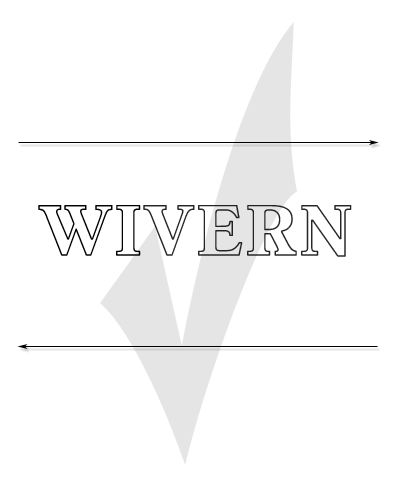
<style>
.page{position:relative;width:400px;height:500px;background:#ffffff}
.page>*{position:absolute;margin:0}
.t1{font:72px "AntiquaHo";color:#262626}
.t2{font:72px "AntiquaHo";color:#000000}
</style>
<div class="page">
<p class="t1" style="left:38px;top:205px;width:314px;height:52px"><span class="t2">WI</span>VERN</p>
</div>
